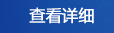
<style>
.page{position:relative;width:114px;height:33px}
.page>*{position:absolute;margin:0}
.t1{font:16px "MicrosoftYaHei";color:#fefcfc;font-weight:bold}
</style>
<div class="page">
<p class="t1" style="left:29px;top:7px;width:65px;height:17px">查看详细</p>
</div>
